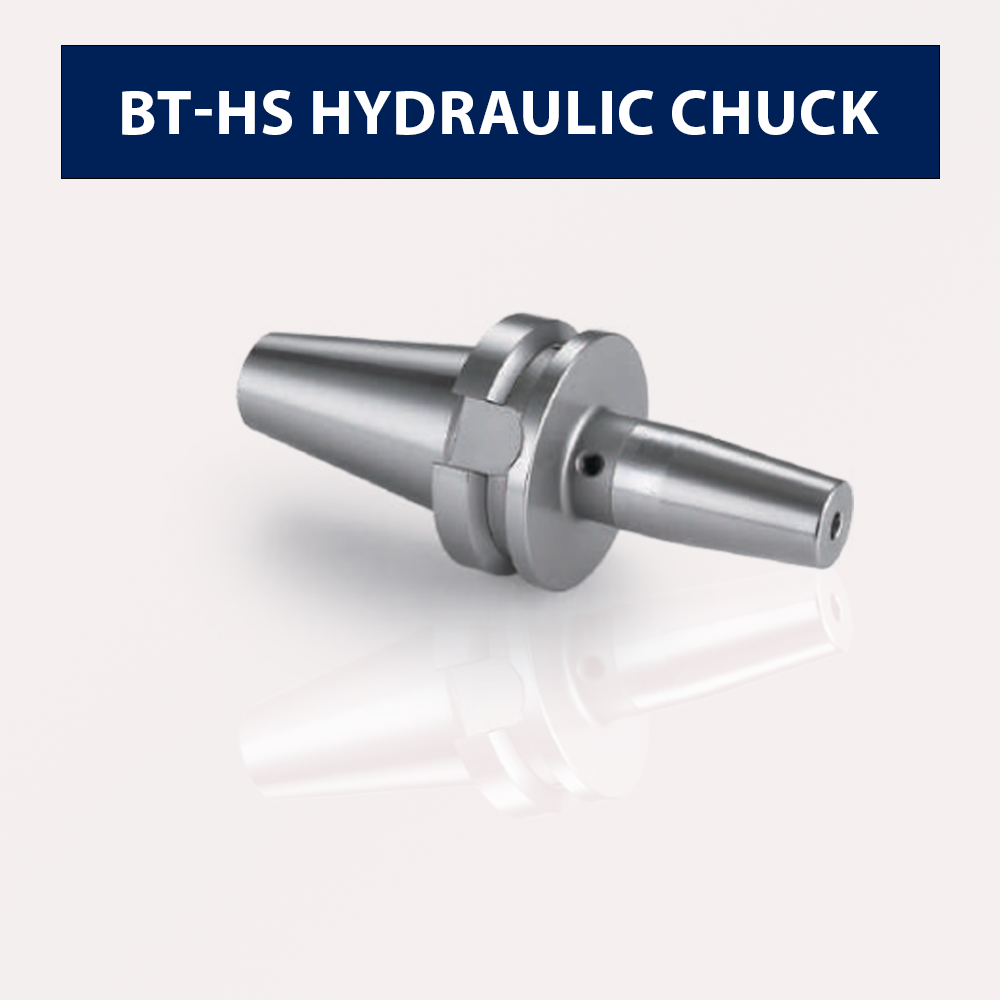
<style>
.page{position:relative;width:1000px;height:1000px;background:#f5efef}
.page>*{position:absolute;margin:0}
.t1{font:64px "MyriadPro-Bold";color:#ffffff;text-transform:uppercase}
</style>
<div class="page">
<p class="t1" style="left:122px;top:90px;width:757px;height:45px">bt-HS hydraulic chuck</p>
</div>
